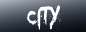
<style>
.page{position:relative;width:86px;height:32px}
.page>*{position:absolute;margin:0}
.t1{font:37.3px "YouMurdererBB";color:#ffffff;scale:0.84 1}
</style>
<div class="page">
<p class="t1" style="left:25px;top:5px;width:36px;height:25px">City</p>
</div>
